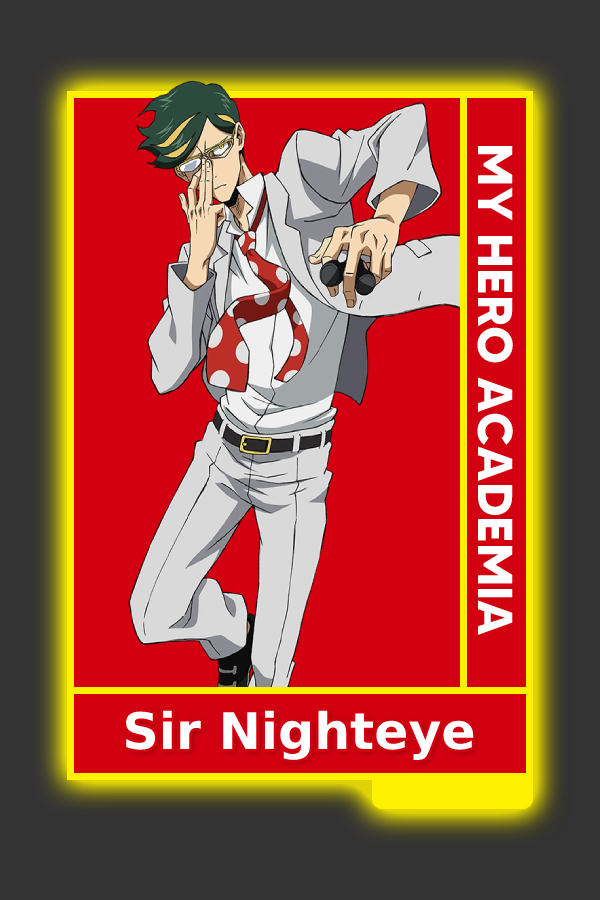
<style>
.page{position:relative;width:600px;height:900px;background:#d20010}
.page>*{position:absolute;margin:0}
.t1{font:48.8px "MADETOMMY-Bold";color:#ffffff}
.t2{font:50.5px "MADETOMMY-Bold";color:#ffffff}
</style>
<div class="page">
<p class="t1" style="left:477px;top:146px;width:36px;height:489px;rotate:90deg">MY HERO ACADEMIA</p>
<p class="t2" style="left:126px;top:710px;width:348px;height:50px">Sir Nighteye</p>
</div>
